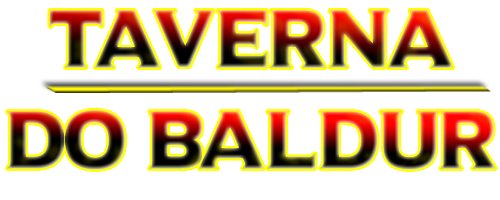
<style>
.page{position:relative;width:500px;height:200px;background:#ffffff}
.page>*{position:absolute;margin:0}
.t1{font:81.3px/100.4px "UniversalSerif";scale:0.92 1}
</style>
<div class="page">
<p class="t1" style="left:7px;top:10px;width:489px;height:160px;text-align:center">Taverna<br>do Baldur</p>
</div>
